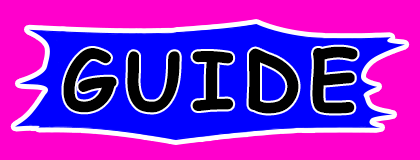
<style>
.page{position:relative;width:420px;height:160px;background:#ff00cc}
.page>*{position:absolute;margin:0}
.t1{font:80px "ComicSansMS-Bold";letter-spacing:0.1em;color:#000000}
</style>
<div class="page">
<p class="t1" style="left:63px;top:46px;width:295px;height:68px">GUIDE</p>
</div>
